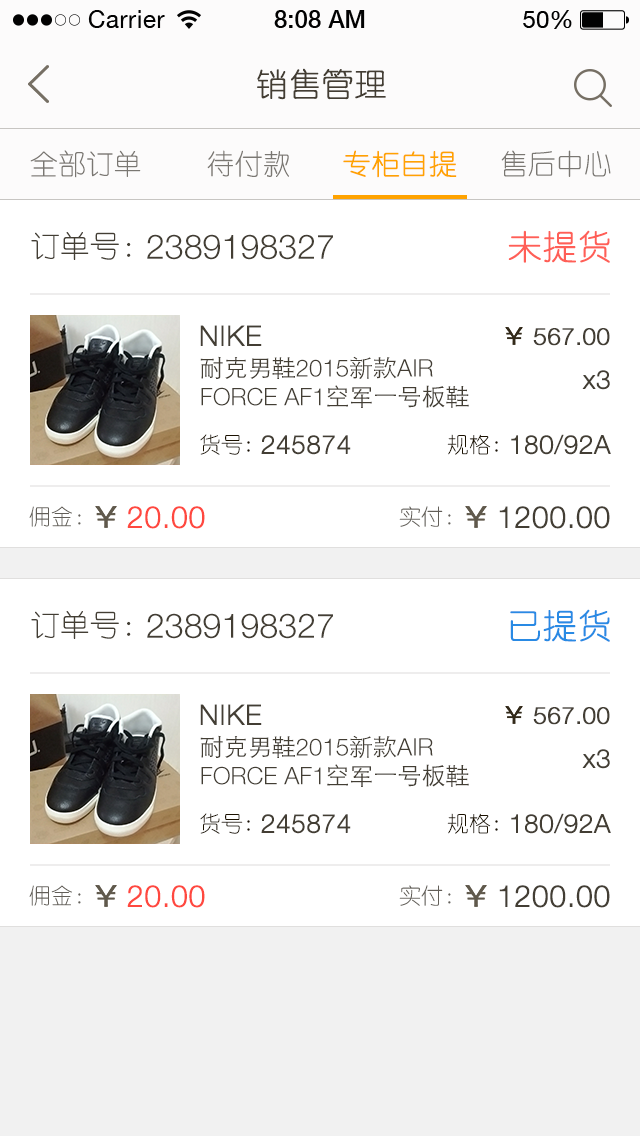
<style>
.page{position:relative;width:640px;height:1136px;background:#ffffff}
.page>*{position:absolute;margin:0}
.t1{font:32px "YouYuan";color:#433d33;text-transform:uppercase;font-weight:bold}
.t2{font:28px "YouYuan";color:#7a7772;text-transform:uppercase}
.t3{font:28px "YouYuan";color:#ffa300;text-transform:uppercase;font-weight:bold}
.t4{font:30px "YouYuan";color:#433e34;text-transform:uppercase}
.t5{font:34px "YouYuan";color:#ff5f57;text-transform:uppercase;font-weight:bold}
.t6{font:34px "HelveticaNeueLTPro-Lt";color:#433e34;text-transform:uppercase}
.t7{font:28px "HelveticaNeueLTPro-Lt";color:#433e34;text-transform:uppercase;font-weight:bold}
.t8{font:24px "HelveticaNeueLTPro-Lt";color:#433e34;text-transform:uppercase;font-weight:bold}
.t9{font:24px "HelveticaNeueLTPro-Lt";color:#433e34;text-transform:uppercase}
.t10{font:24px "STHeitiSC-Light";color:#433e34;text-transform:uppercase}
.t11{font:26px "HelveticaNeueLTPro-Lt";color:#433e34;font-weight:bold}
.t12{font:22px "YouYuan";color:#1b1100;text-transform:uppercase}
.t13{font:26px "HelveticaNeueLTPro-Lt";color:#433e34;text-transform:uppercase;font-weight:bold}
.t14{font:22px "YouYuan";color:#625e58;text-transform:uppercase}
.t15{font:30px "HelveticaNeueLTPro-Lt";color:#ff483f;text-transform:uppercase;font-weight:bold}
.t16{font:30px "HelveticaNeueLTPro-Lt";color:#433e34;text-transform:uppercase;font-weight:bold}
.t17{font:34px "YouYuan";color:#298ae4;text-transform:uppercase;font-weight:bold}
</style>
<div class="page">
<p class="t1" style="left:257px;top:68px;width:129px;height:32px">销售管理</p>
<p class="t2" style="left:30px;top:150px;width:111px;height:28px">全部订单</p>
<p class="t2" style="left:207px;top:150px;width:82px;height:27px">待付款</p>
<p class="t3" style="left:343px;top:150px;width:114px;height:28px">专柜自提</p>
<p class="t2" style="left:501px;top:150px;width:110px;height:27px">售后中心</p>
<p class="t4" style="left:31px;top:232px;width:100px;height:28px">订单号：</p>
<p class="t5" style="left:508px;top:230px;width:102px;height:33px">未提货</p>
<p class="t6" style="left:147px;top:234px;width:186px;height:26px">2389198327</p>
<p class="t7" style="left:200px;top:325px;width:62px;height:21px">NIKE</p>
<p class="t8" style="left:533px;top:328px;width:77px;height:18px">567.00</p>
<p class="t9" style="left:200px;top:356px;width:269px;height:52px"><span class="t10">耐克男鞋</span>2015<span class="t10">新款</span>air force AF1<span class="t10">空军一号板鞋</span></p>
<p class="t11" style="left:582px;top:370px;width:28px;height:20px">x3</p>
<p class="t12" style="left:200px;top:434px;width:50px;height:21px">货号:</p>
<p class="t13" style="left:261px;top:435px;width:90px;height:20px">245874</p>
<p class="t12" style="left:447px;top:434px;width:51px;height:21px">规格:</p>
<p class="t13" style="left:511px;top:434px;width:100px;height:21px">180/92a</p>
<p class="t14" style="left:29px;top:506px;width:52px;height:21px">佣金：</p>
<p class="t15" style="left:127px;top:506px;width:78px;height:23px">20.00</p>
<p class="t14" style="left:399px;top:506px;width:52px;height:21px">实付：</p>
<p class="t16" style="left:499px;top:506px;width:111px;height:23px">1200.00</p>
<p class="t4" style="left:31px;top:611px;width:100px;height:28px">订单号：</p>
<p class="t6" style="left:147px;top:613px;width:186px;height:26px">2389198327</p>
<p class="t17" style="left:510px;top:609px;width:100px;height:33px">已提货</p>
<p class="t7" style="left:200px;top:704px;width:62px;height:21px">NIKE</p>
<p class="t8" style="left:533px;top:707px;width:77px;height:18px">567.00</p>
<p class="t9" style="left:200px;top:735px;width:269px;height:52px"><span class="t10">耐克男鞋</span>2015<span class="t10">新款</span>air force AF1<span class="t10">空军一号板鞋</span></p>
<p class="t11" style="left:582px;top:749px;width:28px;height:20px">x3</p>
<p class="t12" style="left:200px;top:813px;width:50px;height:21px">货号:</p>
<p class="t13" style="left:261px;top:814px;width:90px;height:20px">245874</p>
<p class="t12" style="left:447px;top:813px;width:51px;height:21px">规格:</p>
<p class="t13" style="left:511px;top:813px;width:100px;height:21px">180/92a</p>
<p class="t14" style="left:29px;top:885px;width:52px;height:21px">佣金：</p>
<p class="t15" style="left:127px;top:885px;width:78px;height:23px">20.00</p>
<p class="t14" style="left:399px;top:885px;width:52px;height:21px">实付：</p>
<p class="t16" style="left:499px;top:885px;width:111px;height:23px">1200.00</p>
</div>
